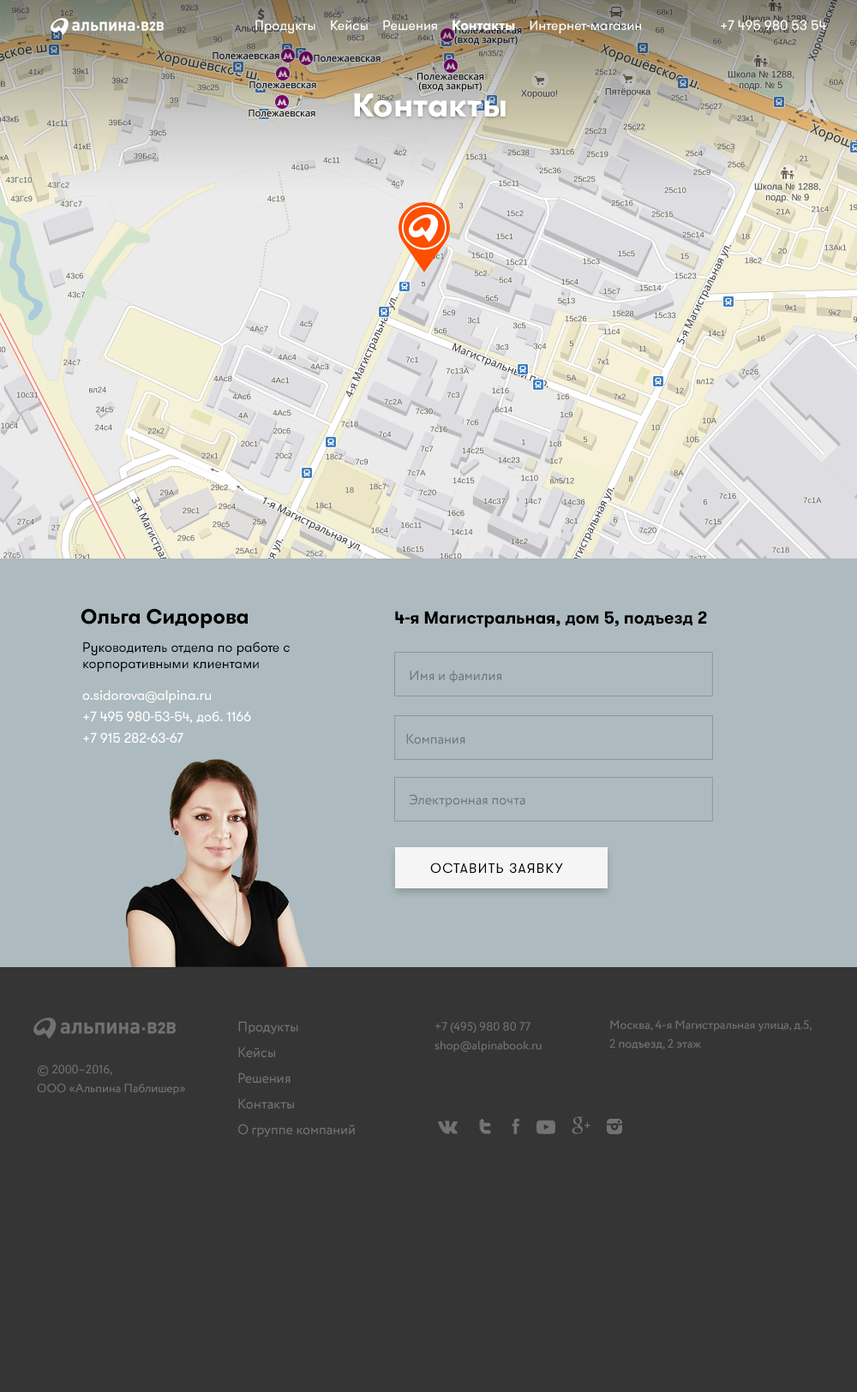
<style>
.page{position:relative;width:857px;height:1392px;background:#353535}
.page>*{position:absolute;margin:0}
.t1{font:13.7px "GTWalsheimProRegular";color:#ffffff}
.t2{font:13.7px "GTWalsheimProBold";color:#ffffff}
.t3{font:32.8px "GTWalsheimProBold";color:#ffffff}
.t4{font:20.6px "GTWalsheimProBold";color:#000000}
.t5{font:17.1px "GTWalsheimProBold";color:#000000}
.t6{font:13.7px "GTWalsheimProRegular";color:#000000}
.t7{font:13.7px "Circe-Regular";color:#6d7679}
.t8{font:13.7px/21.4px "GTWalsheimProRegular";color:#ffffff}
.t9{font:13.7px "GTWalsheimProRegular";letter-spacing:0.08em;color:#000000;text-transform:uppercase}
.t10{font:13.7px/25.7px "Circe-Regular";color:#727272}
.t11{font:12px/18.8px "Circe-Regular";color:#727272}
</style>
<div class="page">
<p class="t1" style="left:255px;top:20px;width:386px;height:14px">Продукты    Кейсы    Решения    <span class="t2">Контакты</span>    Интернет-магазин</p>
<p class="t1" style="left:720px;top:20px;width:106px;height:11px">+7 495 980 53 54</p>
<p class="t3" style="left:354px;top:93px;width:151px;height:24px">Контакты</p>
<p class="t4" style="left:81px;top:608px;width:167px;height:21px">Ольга Сидорова</p>
<p class="t5" style="left:395px;top:611px;width:312px;height:17px">4-я Магистральная, дом 5, подъезд 2</p>
<p class="t6" style="left:83px;top:642px;width:207px;height:30px">Руководитель отдела по работе с корпоративными клиентами</p>
<p class="t7" style="left:409px;top:670px;width:92px;height:13px">Имя и фамилия</p>
<p class="t8" style="left:82px;top:690px;width:169px;height:54px">o.sidorova@alpina.ru<br>+7 495 980-53-54, доб. 1166<br>+7 915 282-63-67</p>
<p class="t7" style="left:406px;top:733px;width:59px;height:11px">Компания</p>
<p class="t7" style="left:409px;top:794px;width:116px;height:13px">Электронная почта</p>
<p class="t9" style="left:430px;top:863px;width:133px;height:11px">ОСТАВИТЬ ЗАЯВКУ</p>
<p class="t10" style="left:238px;top:1021px;width:117px;height:116px">Продукты<br>Кейсы<br>Решения<br>Контакты<br>О группе компаний</p>
<p class="t11" style="left:434px;top:1022px;width:107px;height:30px">+7 (495) 980 80 77<br>shop@alpinabook.ru</p>
<p class="t11" style="left:609px;top:1020px;width:202px;height:29px">Москва, 4-я Магистральная улица, д.5, 2 подъезд, 2 этаж</p>
<p class="t11" style="left:37px;top:1065px;width:148px;height:30px">© 2000–2016,<br>ООО «Альпина Паблишер»</p>
</div>
